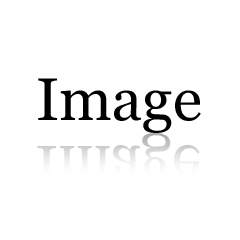
<style>
.page{position:relative;width:240px;height:240px;background:#ffffff}
.page>*{position:absolute;margin:0}
.t1{font:60px "Georgia";color:#000000}
.t2{font:60px "Georgia";color:#ececec}
</style>
<div class="page">
<p class="t1" style="left:38px;top:78px;width:163px;height:55px">Image</p>
<p class="t2" style="left:37px;top:133px;width:163px;height:55px">Image</p>
</div>
